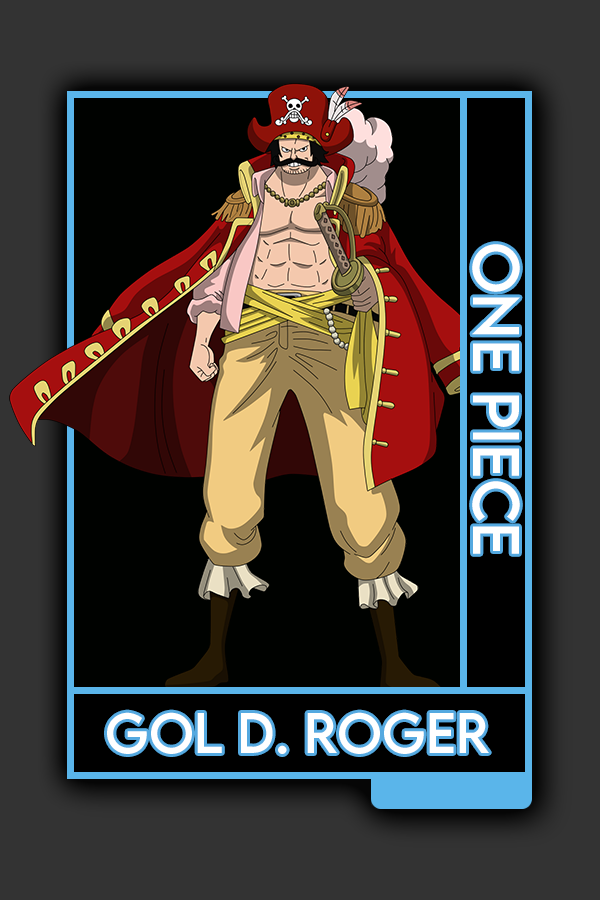
<style>
.page{position:relative;width:600px;height:900px;background:#333333}
.page>*{position:absolute;margin:0}
.t1{font:58.4px "LEMONMILK-Regular";color:#ffffff}
.t2{font:50.5px "LEMONMILK-Regular";color:#ffffff}
</style>
<div class="page">
<p class="t1" style="left:472px;top:244px;width:48px;height:310px;rotate:90deg">One Piece</p>
<p class="t2" style="left:107px;top:712px;width:382px;height:42px">Gol D. Roger</p>
</div>
